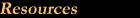
<style>
.page{position:relative;width:140px;height:18px;background:#000000}
.page>*{position:absolute;margin:0}
.t1{font:18px "Garamond-Bold";color:#fec45f;font-style:italic}
</style>
<div class="page">
<p class="t1" style="left:0px;top:2px;width:77px;height:13px">Resources</p>
</div>
